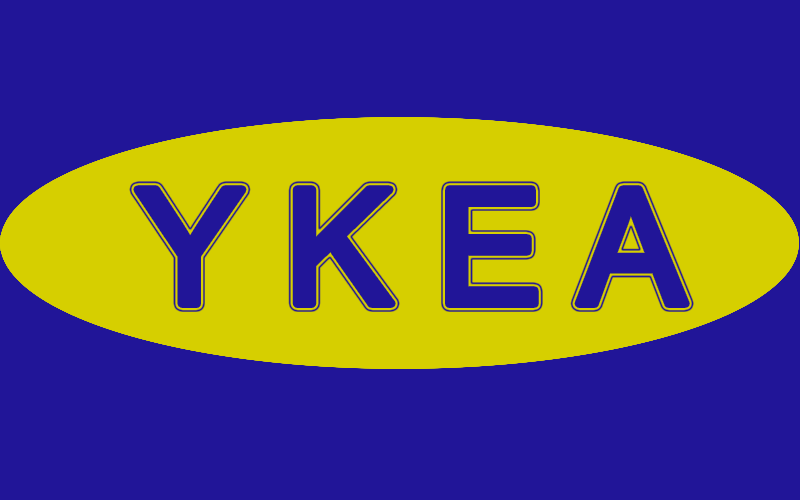
<style>
.page{position:relative;width:800px;height:500px;background:#211598}
.page>*{position:absolute;margin:0}
.t1{font:160px "ArialMT";color:#211598}
</style>
<div class="page">
<p class="t1" style="left:137px;top:189px;width:549px;height:115px">Y K E A</p>
</div>
